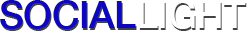
<style>
.page{position:relative;width:247px;height:31px;background:#ffffff}
.page>*{position:absolute;margin:0}
.t1{font:37.5px "HelveticaNeue-Medium";color:#0d07bf}
.t2{font:37.5px "HelveticaNeue-Medium";color:#ffffff}
</style>
<div class="page">
<p class="t1" style="left:0px;top:0px;width:246px;height:29px">SOCIAL<span class="t2">LIGHT</span></p>
</div>
